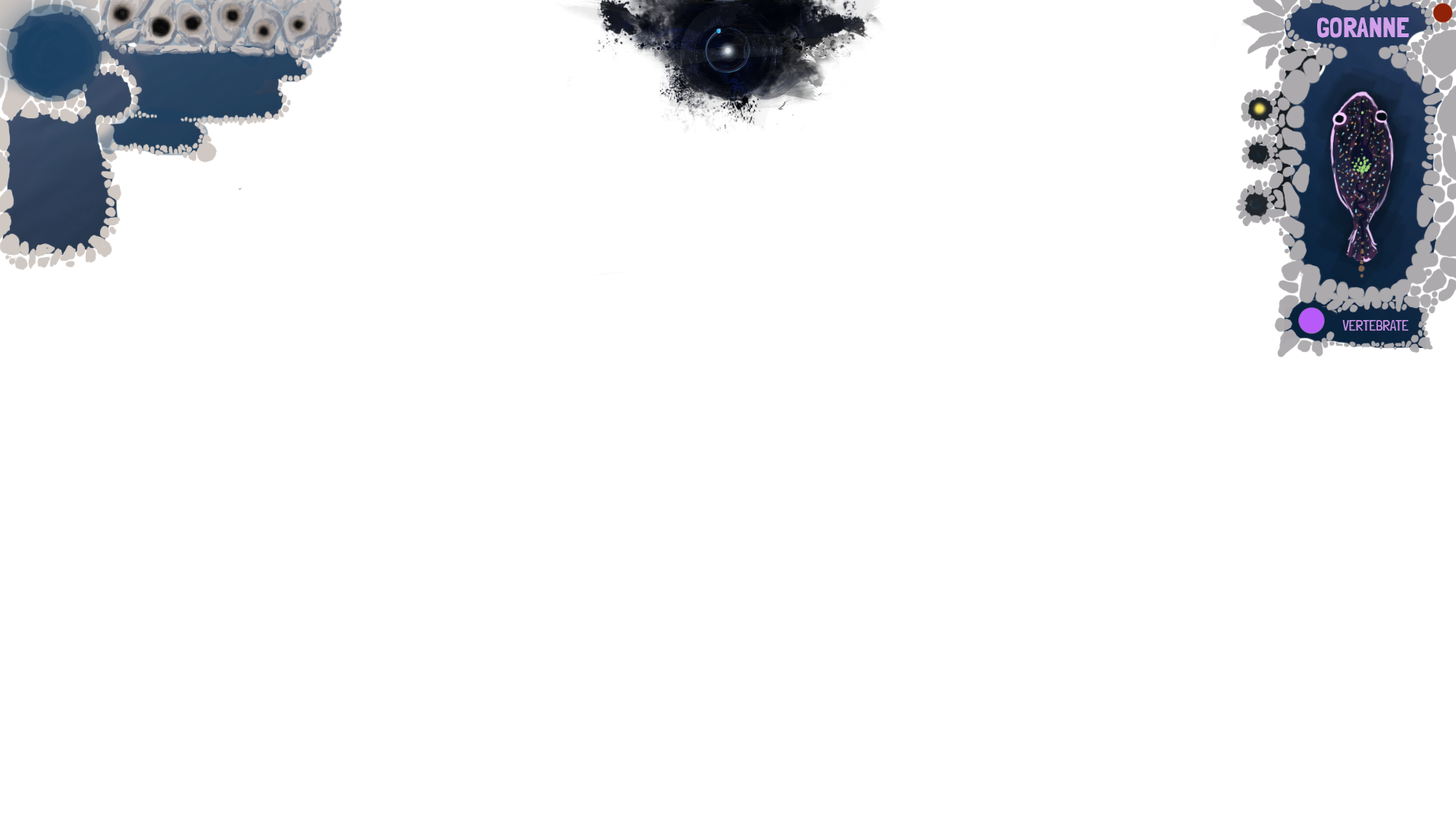
<style>
.page{position:relative;width:1456px;height:819px;background:#ffffff}
.page>*{position:absolute;margin:0}
.t1{font:27.3px "LondrinaSolid-Regular";color:#d2a0eb}
.t2{font:14.1px "LondrinaSolid-Light";color:#c690e1}
</style>
<div class="page">
<p class="t1" style="left:1317px;top:17px;width:92px;height:21px">GORANNE</p>
<p class="t2" style="left:1342px;top:320px;width:67px;height:11px">VERTEBRATE</p>
</div>
